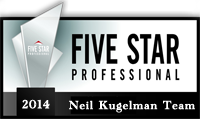
<style>
.page{position:relative;width:200px;height:119px;background:#ffffff}
.page>*{position:absolute;margin:0}
.t1{font:12px "AcademyEngravedLetPlain";letter-spacing:0.05em;color:#ffffff;font-weight:bold}
</style>
<div class="page">
<p class="t1" style="left:22px;top:99px;width:28px;height:10px">2014</p>
<p class="t1" style="left:69px;top:100px;width:126px;height:13px">Neil Kugelman Team</p>
</div>
